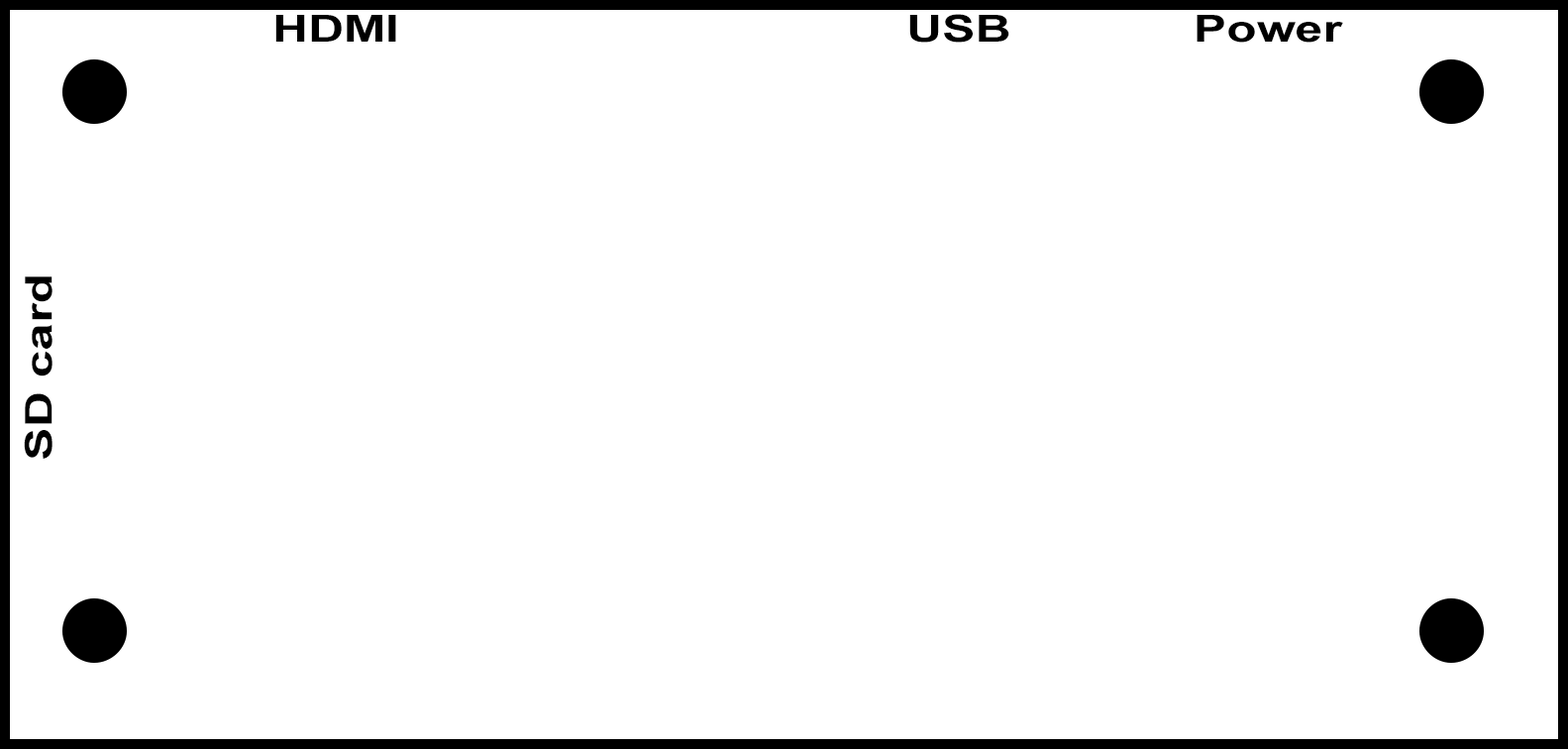
<style>
.page{position:relative;width:1568px;height:749px;background:#ffffff}
.page>*{position:absolute;margin:0}
.t1{font:37.1px "Arial-BoldMT";color:#000000;scale:1.33 1}
</style>
<div class="page">
<p class="t1" style="left:275px;top:15px;width:121px;height:27px">HDMI</p>
<p class="t1" style="left:909px;top:14px;width:100px;height:29px">USB</p>
<p class="t1" style="left:1197px;top:15px;width:146px;height:28px">Power</p>
<p class="t1" style="left:24px;top:276px;width:28px;height:183px;rotate:-90deg">SD card</p>
</div>
